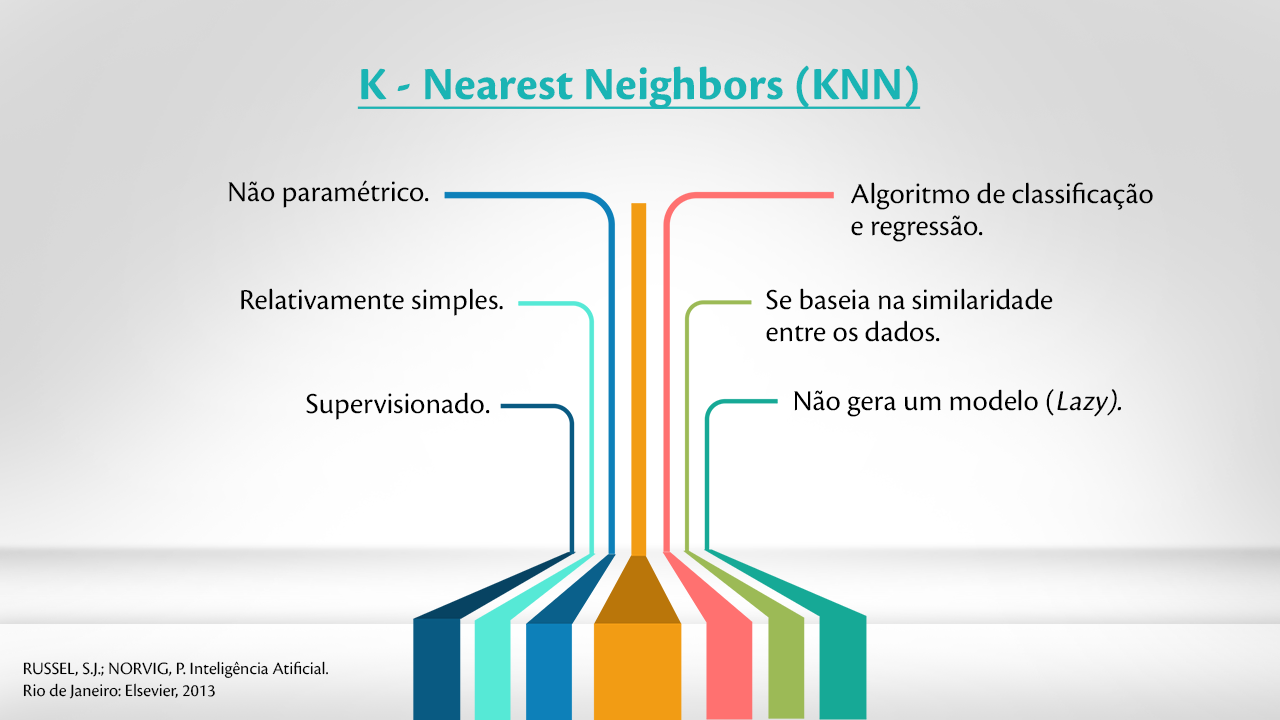
<style>
.page{position:relative;width:1280px;height:720px}
.page>*{position:absolute;margin:0}
.t1{font:47.8px "CronosPro-Bold";color:#1ab4b4;text-decoration:underline}
.t2{font:30px "CronosPro-Regular";color:#000000}
.t3{font:30px/31.8px "CronosPro-Regular";color:#000000}
.t4{font:30px "CronosPro-Regular";color:#000000;font-style:italic}
.t5{font:18px "CronosPro-Regular";color:#000000}
</style>
<div class="page">
<p class="t1" style="left:357px;top:65px;width:564px;height:44px">K - Nearest Neighbors (KNN)</p>
<p class="t2" style="left:228px;top:180px;width:201px;height:28px">Não paramétrico.</p>
<p class="t3" style="left:851px;top:182px;width:302px;height:60px">Algoritmo de classificação e regressão.</p>
<p class="t2" style="left:241px;top:288px;width:262px;height:28px">Relativamente simples.</p>
<p class="t3" style="left:766px;top:288px;width:287px;height:54px">Se baseia na similaridade entre os dados.</p>
<p class="t2" style="left:794px;top:389px;width:327px;height:28px">Não gera um modelo (<span class="t4">Lazy).</span></p>
<p class="t2" style="left:306px;top:392px;width:184px;height:28px">Supervisionado.</p>
<p class="t5" style="left:23px;top:661px;width:305px;height:38px">RUSSEL, S.J.; NORVIG, P. Inteligência Atificial. <br>Rio de Janeiro: Elsevier, 2013</p>
</div>
